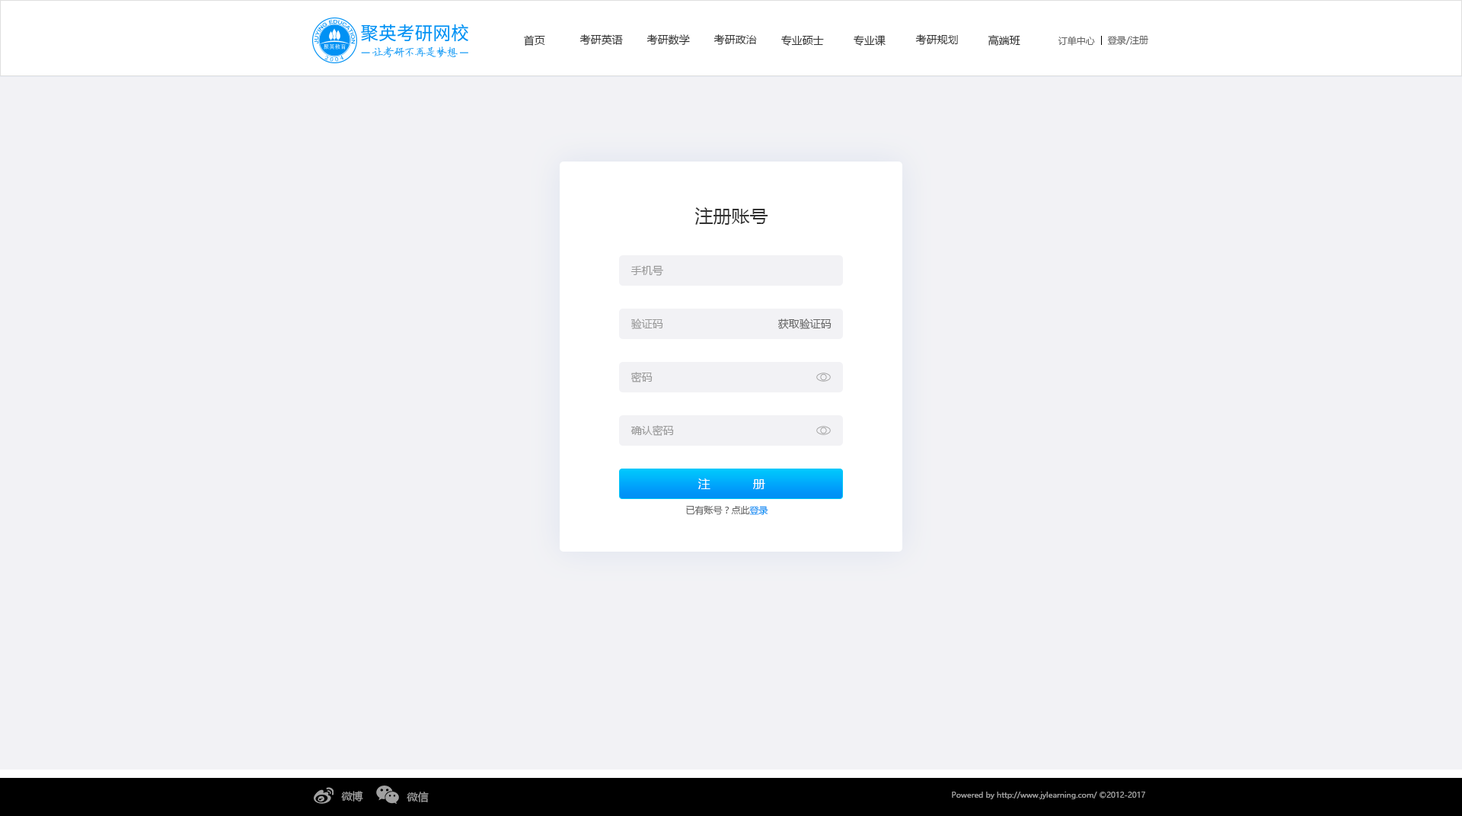
<style>
.page{position:relative;width:1462px;height:816px;background:#f2f2f5}
.page>*{position:absolute;margin:0}
.t1{font:10.7px "MicrosoftYaHei";color:#333333}
.t2{font:9.1px "MicrosoftYaHei";color:#666666}
.t3{font:18.3px "MicrosoftYaHei";color:#333333}
.t4{font:10.7px "MicrosoftYaHei";color:#999999}
.t5{font:10.7px "MicrosoftYaHei";color:#666666}
.t6{font:12.2px "MicrosoftYaHei";color:#ffffff}
.t7{font:9.1px "MicrosoftYaHei";color:#0091f4}
.t8{font:10.7px "MicrosoftYaHei";color:#a1a1a1}
.t9{font:7.6px "MicrosoftYaHei";color:#a1a1a1}
</style>
<div class="page">
<p class="t1" style="left:524px;top:35px;width:21px;height:11px">首页</p>
<p class="t1" style="left:580px;top:34px;width:43px;height:11px">考研英语</p>
<p class="t1" style="left:647px;top:34px;width:43px;height:11px">考研数学</p>
<p class="t1" style="left:714px;top:34px;width:43px;height:11px">考研政治</p>
<p class="t1" style="left:781px;top:35px;width:43px;height:11px">专业硕士</p>
<p class="t1" style="left:854px;top:35px;width:32px;height:11px">专业课</p>
<p class="t1" style="left:915px;top:34px;width:43px;height:11px">考研规划</p>
<p class="t1" style="left:988px;top:35px;width:32px;height:11px">高端班</p>
<p class="t2" style="left:1058px;top:36px;width:37px;height:10px">订单中心</p>
<p class="t2" style="left:1107px;top:36px;width:41px;height:9px">登录/注册</p>
<p class="t3" style="left:694px;top:207px;width:74px;height:18px">注册账号</p>
<p class="t4" style="left:631px;top:265px;width:32px;height:11px">手机号</p>
<p class="t4" style="left:631px;top:318px;width:32px;height:11px">验证码</p>
<p class="t5" style="left:778px;top:318px;width:54px;height:11px">获取验证码</p>
<p class="t4" style="left:631px;top:372px;width:22px;height:10px">密码</p>
<p class="t4" style="left:631px;top:425px;width:43px;height:11px">确认密码</p>
<p class="t6" style="left:698px;top:478px;width:67px;height:11px">注  册</p>
<p class="t2" style="left:686px;top:505px;width:82px;height:10px">已有账号？点此<span class="t7">登录</span></p>
<p class="t8" style="left:341px;top:790px;width:22px;height:11px">微博</p>
<p class="t8" style="left:407px;top:791px;width:22px;height:11px">微信</p>
<p class="t9" style="left:952px;top:791px;width:193px;height:8px">Powered by http://www.jylearning.com/ ©2012-2017</p>
</div>
